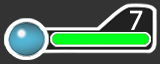
<style>
.page{position:relative;width:160px;height:64px;background:#333333}
.page>*{position:absolute;margin:0}
.t1{font:29.2px "MyriadPro-Regular";color:#fefefe}
</style>
<div class="page">
<p class="t1" style="left:130px;top:10px;width:13px;height:20px">7</p>
</div>
